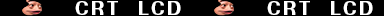
<style>
.page{position:relative;width:384px;height:16px;background:#000000}
.page>*{position:absolute;margin:0}
.t1{font:17px "FolkPro-Heavy";letter-spacing:0.165em;color:#ffffff}
</style>
<div class="page">
<p class="t1" style="left:75px;top:1px;width:43px;height:14px">CRT</p>
<p class="t1" style="left:139px;top:1px;width:42px;height:14px">LCD</p>
<p class="t1" style="left:267px;top:1px;width:43px;height:14px">CRT</p>
<p class="t1" style="left:331px;top:1px;width:42px;height:14px">LCD</p>
</div>
